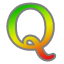
<style>
.page{position:relative;width:64px;height:64px;background:#ffffff}
.page>*{position:absolute;margin:0}
.t1{font:59.8px "PoorRichard-Regular"}
</style>
<div class="page">
<p class="t1" style="left:8px;top:4px;width:47px;height:56px">Q</p>
</div>
